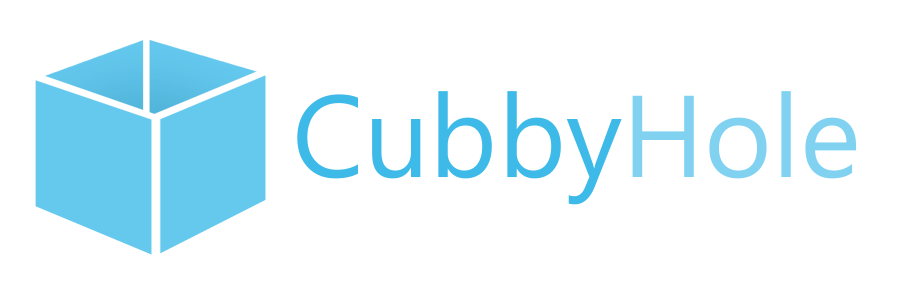
<style>
.page{position:relative;width:900px;height:293px;background:#ffffff}
.page>*{position:absolute;margin:0}
.t1{font:115.9px "Gadugi";color:#3ebae9}
.t2{font:115.9px "Gadugi";color:#81d2f1}
</style>
<div class="page">
<p class="t1" style="left:297px;top:91px;width:560px;height:114px">Cubby<span class="t2">Hole</span></p>
</div>
